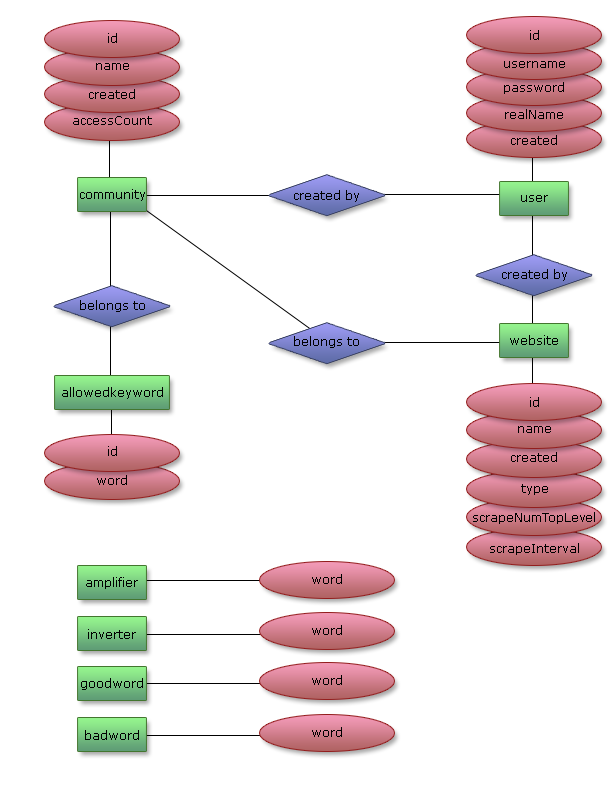
<style>
.page{position:relative;width:612px;height:792px;background:#ffffff}
.page>*{position:absolute;margin:0}
.t1{font:12px "Verdana";color:#010000}
.t2{font:12px "Verdana";color:#000000}
</style>
<div class="page">
<p class="t1" style="left:530px;top:30px;width:9px;height:10px">id</p>
<p class="t2" style="left:108px;top:33px;width:9px;height:10px">id</p>
<p class="t2" style="left:96px;top:63px;width:33px;height:7px">name</p>
<p class="t1" style="left:504px;top:61px;width:61px;height:7px">username</p>
<p class="t2" style="left:89px;top:89px;width:46px;height:10px">created</p>
<p class="t1" style="left:504px;top:82px;width:60px;height:12px">password</p>
<p class="t1" style="left:505px;top:109px;width:58px;height:10px">realName</p>
<p class="t2" style="left:73px;top:116px;width:79px;height:9px">accessCount</p>
<p class="t1" style="left:511px;top:135px;width:46px;height:10px">created</p>
<p class="t2" style="left:80px;top:189px;width:65px;height:12px">community</p>
<p class="t2" style="left:294px;top:190px;width:65px;height:12px">created by</p>
<p class="t1" style="left:521px;top:195px;width:27px;height:7px">user</p>
<p class="t2" style="left:502px;top:269px;width:65px;height:12px">created by</p>
<p class="t2" style="left:80px;top:300px;width:65px;height:12px">belongs to</p>
<p class="t2" style="left:294px;top:336px;width:65px;height:12px">belongs to</p>
<p class="t2" style="left:510px;top:335px;width:48px;height:10px">website</p>
<p class="t2" style="left:62px;top:387px;width:101px;height:12px">allowedkeyword</p>
<p class="t2" style="left:530px;top:397px;width:9px;height:10px">id</p>
<p class="t2" style="left:518px;top:426px;width:33px;height:7px">name</p>
<p class="t2" style="left:108px;top:446px;width:9px;height:10px">id</p>
<p class="t2" style="left:511px;top:452px;width:46px;height:10px">created</p>
<p class="t2" style="left:97px;top:475px;width:30px;height:10px">word</p>
<p class="t2" style="left:521px;top:484px;width:27px;height:11px">type</p>
<p class="t2" style="left:473px;top:512px;width:122px;height:12px">scrapeNumTopLevel</p>
<p class="t2" style="left:490px;top:543px;width:89px;height:12px">scrapeInterval</p>
<p class="t2" style="left:86px;top:577px;width:52px;height:12px">amplifier</p>
<p class="t2" style="left:312px;top:574px;width:30px;height:10px">word</p>
<p class="t2" style="left:88px;top:629px;width:48px;height:10px">inverter</p>
<p class="t2" style="left:312px;top:625px;width:30px;height:10px">word</p>
<p class="t2" style="left:81px;top:678px;width:62px;height:12px">goodword</p>
<p class="t2" style="left:312px;top:675px;width:30px;height:10px">word</p>
<p class="t2" style="left:85px;top:730px;width:54px;height:10px">badword</p>
<p class="t2" style="left:312px;top:727px;width:30px;height:10px">word</p>
</div>
